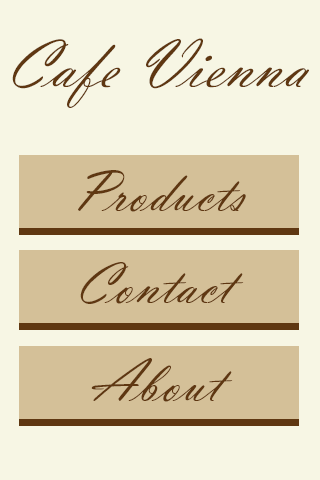
<style>
.page{position:relative;width:320px;height:480px;background:#f7f6e4}
.page>*{position:absolute;margin:0}
.t1{font:70px "VladimirScript";color:#5f3711}
.t2{font:60px "VladimirScript";color:#5f3711}
</style>
<div class="page">
<p class="t1" style="left:12px;top:38px;width:297px;height:70px">Cafe Vienna</p>
<p class="t2" style="left:78px;top:170px;width:168px;height:42px">Products</p>
<p class="t2" style="left:80px;top:262px;width:164px;height:42px">Contact</p>
<p class="t2" style="left:91px;top:358px;width:142px;height:44px">About</p>
</div>
